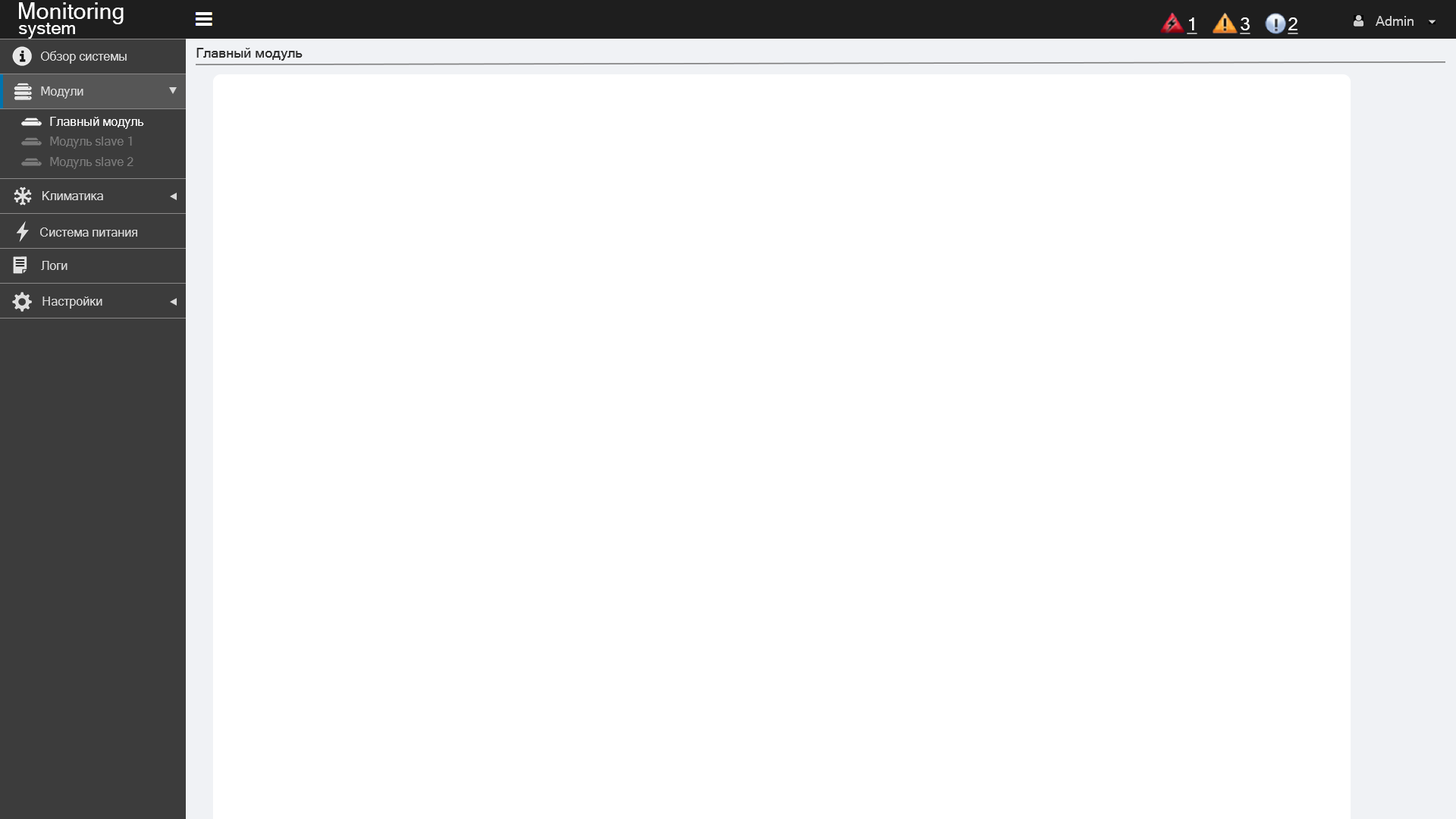
<style>
.page{position:relative;width:1456px;height:819px;background:#ffffff}
.page>*{position:absolute;margin:0}
.t1{font:22.7px "MicrosoftSansSerif";color:#ffffff}
.t2{font:18.2px "MicrosoftSansSerif";color:#ffffff}
.t3{font:12.1px "MicrosoftSansSerif";color:#d9d9d9}
.t4{font:13.6px "MicrosoftSansSerif";color:#2f2f2f}
.t5{font:12.1px "MicrosoftSansSerif";color:#ffffff}
.t6{font:12.1px "MicrosoftSansSerif";color:#797979}
</style>
<div class="page">
<p class="t1" style="left:19px;top:2px;width:105px;height:22px">Monitoring</p>
<p class="t2" style="left:19px;top:23px;width:56px;height:16px">system</p>
<p class="t3" style="left:41px;top:51px;width:86px;height:13px">Обзор системы</p>
<p class="t4" style="left:196px;top:48px;width:107px;height:13px">Главный модуль</p>
<p class="t3" style="left:41px;top:86px;width:42px;height:13px">Модули</p>
<p class="t5" style="left:50px;top:117px;width:94px;height:12px">Главный модуль</p>
<p class="t6" style="left:50px;top:136px;width:82px;height:13px">Модуль slave 1</p>
<p class="t6" style="left:50px;top:157px;width:83px;height:12px">Модуль slave 2</p>
<p class="t3" style="left:42px;top:191px;width:61px;height:9px">Климатика</p>
<p class="t3" style="left:40px;top:227px;width:97px;height:10px">Система питания</p>
<p class="t3" style="left:41px;top:261px;width:26px;height:9px">Логи</p>
<p class="t3" style="left:42px;top:297px;width:60px;height:12px">Настройки</p>
</div>
